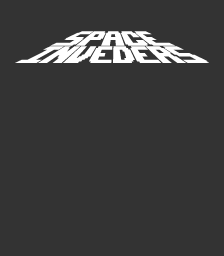
<style>
.page{position:relative;width:224px;height:256px;background:#333333}
.page>*{position:absolute;margin:0}
.t1{font:28.5px "UpheavalTT-BRK-";color:#ffffff;scale:1.05 1}
.t2{font:32.9px "UpheavalTT-BRK-";color:#ffffff}
</style>
<div class="page">
<p class="t1" style="left:50px;top:31px;width:126px;height:15px">Space</p>
<p class="t2" style="left:15px;top:46px;width:194px;height:17px">Inveders</p>
</div>
